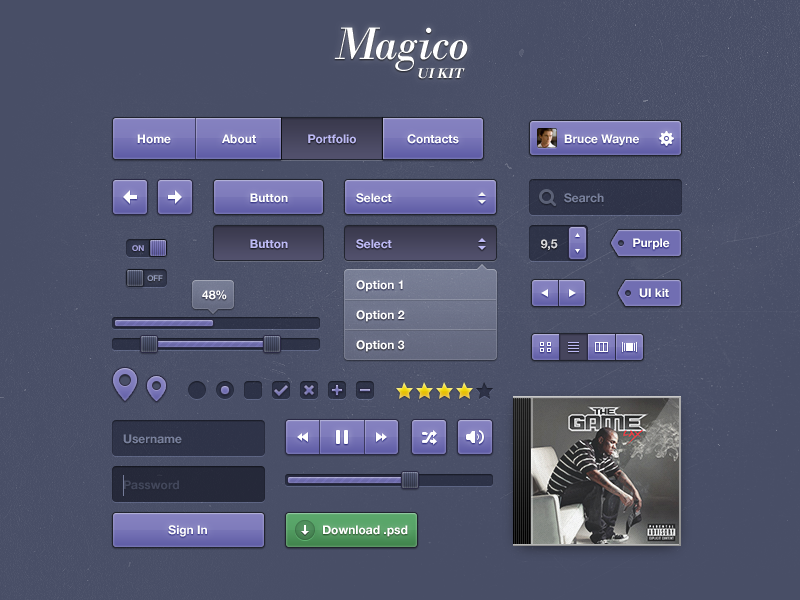
<style>
.page{position:relative;width:800px;height:600px;background:#484e66}
.page>*{position:absolute;margin:0}
.t1{font:12px "HelveticaNeue-Bold";color:#ffffff}
.t2{font:12px "HelveticaNeue-Bold";color:#bdbaf5}
.t3{font:12px "HelveticaNeue-Bold";color:#79819d}
.t4{font:8px "HelveticaNeue-Bold";color:#a5a3df;text-transform:uppercase}
.t5{font:12px "HelveticaNeue-Bold";color:#d8d8db}
.t6{font:8px "HelveticaNeue-Bold";color:#9098b8;text-transform:uppercase}
.t7{font:12px "HelveticaNeue-Bold";color:#42475b}
</style>
<div class="page">
<p class="t1" style="left:137px;top:134px;width:34px;height:10px">Home</p>
<p class="t1" style="left:222px;top:134px;width:34px;height:10px">About</p>
<p class="t2" style="left:308px;top:134px;width:48px;height:10px">Portfolio</p>
<p class="t1" style="left:407px;top:134px;width:52px;height:10px">Contacts</p>
<p class="t1" style="left:564px;top:134px;width:75px;height:12px">Bruce Wayne</p>
<p class="t1" style="left:250px;top:193px;width:38px;height:10px">Button</p>
<p class="t1" style="left:356px;top:193px;width:36px;height:10px">Select</p>
<p class="t3" style="left:564px;top:193px;width:40px;height:10px">Search</p>
<p class="t4" style="left:132px;top:245px;width:12px;height:6px">On</p>
<p class="t2" style="left:250px;top:239px;width:38px;height:10px">Button</p>
<p class="t2" style="left:356px;top:239px;width:36px;height:10px">Select</p>
<p class="t5" style="left:541px;top:239px;width:17px;height:11px">9,5</p>
<p class="t1" style="left:633px;top:238px;width:37px;height:12px">Purple</p>
<p class="t6" style="left:147px;top:275px;width:16px;height:6px">Off</p>
<p class="t1" style="left:356px;top:280px;width:47px;height:12px">Option 1</p>
<p class="t1" style="left:202px;top:290px;width:25px;height:10px">48%</p>
<p class="t1" style="left:639px;top:288px;width:30px;height:10px">UI kit</p>
<p class="t1" style="left:356px;top:310px;width:49px;height:12px">Option 2</p>
<p class="t1" style="left:356px;top:340px;width:49px;height:12px">Option 3</p>
<p class="t3" style="left:123px;top:434px;width:59px;height:10px">Username</p>
<p class="t7" style="left:123px;top:480px;width:56px;height:10px">Password</p>
<p class="t1" style="left:168px;top:525px;width:39px;height:12px">Sign In</p>
<p class="t1" style="left:323px;top:525px;width:85px;height:12px">Download .psd</p>
</div>
